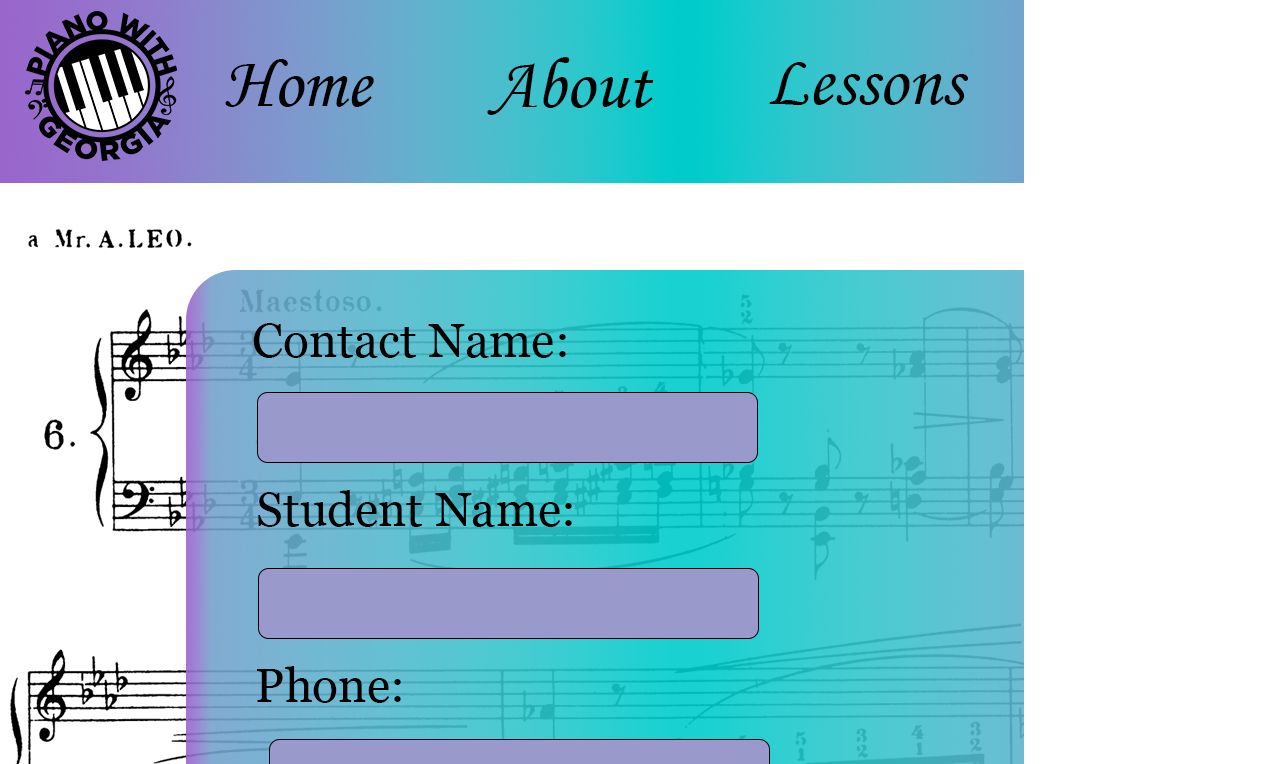
<style>
.page{position:relative;width:1285px;height:764px;background:#ffffff}
.page>*{position:absolute;margin:0}
.t1{font:72px "MonotypeCorsiva";color:#000000}
.t2{font:48px "Georgia";color:#000000}
</style>
<div class="page">
<p class="t1" style="left:225px;top:59px;width:149px;height:48px">Home</p>
<p class="t1" style="left:487px;top:57px;width:167px;height:58px">About</p>
<p class="t1" style="left:769px;top:62px;width:200px;height:43px">Lessons</p>
<p class="t2" style="left:253px;top:323px;width:313px;height:35px">Contact Name:</p>
<p class="t2" style="left:258px;top:490px;width:314px;height:37px">Student Name:</p>
<p class="t2" style="left:257px;top:666px;width:144px;height:37px">Phone:</p>
</div>
